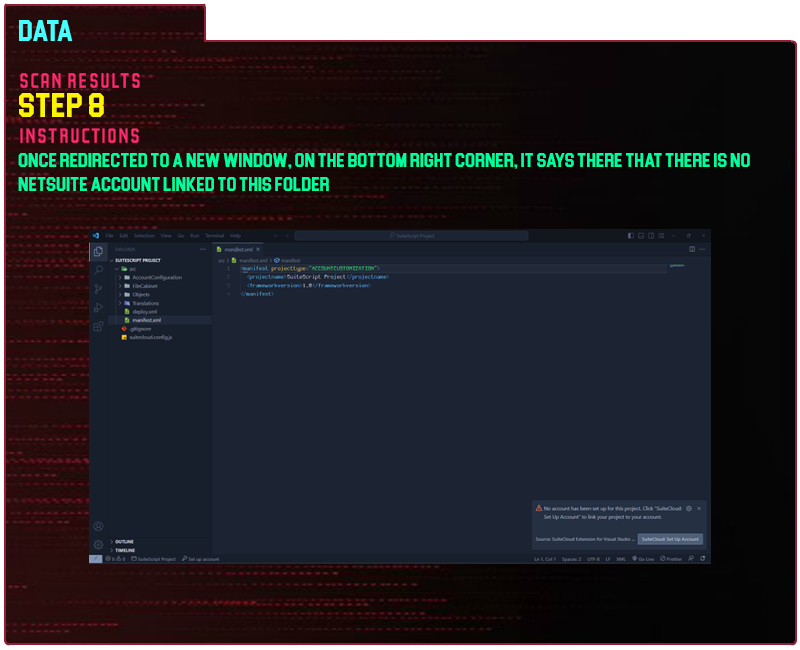
<style>
.page{position:relative;width:800px;height:650px;background:#1c2433}
.page>*{position:absolute;margin:0}
.t1{font:30px "Blockletter";color:#43ffff}
.t2{font:35px "Party-Lights-[WLM]-Flat";color:#ff296d}
.t3{font:35px "Blockletter";color:#fdf500}
.t4{font:20px "Blockletter";color:#00ff9f}
</style>
<div class="page">
<p class="t1" style="left:19px;top:20px;width:54px;height:21px">Data</p>
<p class="t2" style="left:20px;top:73px;width:120px;height:15px">Scan REsults</p>
<p class="t3" style="left:19px;top:93px;width:85px;height:24px">Step 8</p>
<p class="t2" style="left:20px;top:128px;width:119px;height:15px">instructions</p>
<p class="t4" style="left:18px;top:153px;width:732px;height:38px">once redirected to a new window, on the bottom right corner, It says there that there is no netsuite account linked to this folder</p>
</div>
